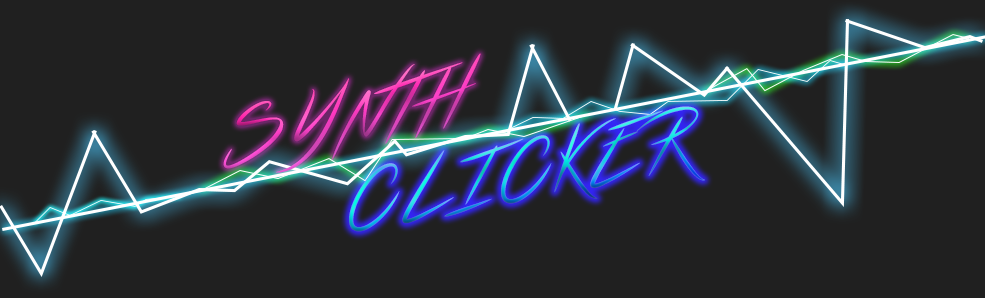
<style>
.page{position:relative;width:985px;height:298px;background:#202020}
.page>*{position:absolute;margin:0}
.t1{font:58.3px "Streamster";letter-spacing:0.02em;text-transform:uppercase}
</style>
<div class="page">
<p class="t1" style="left:223px;top:53px;width:258px;height:120px;rotate:-10deg">synth</p>
<p class="t1" style="left:349px;top:106px;width:356px;height:126px;rotate:-10deg">Clicker</p>
</div>
